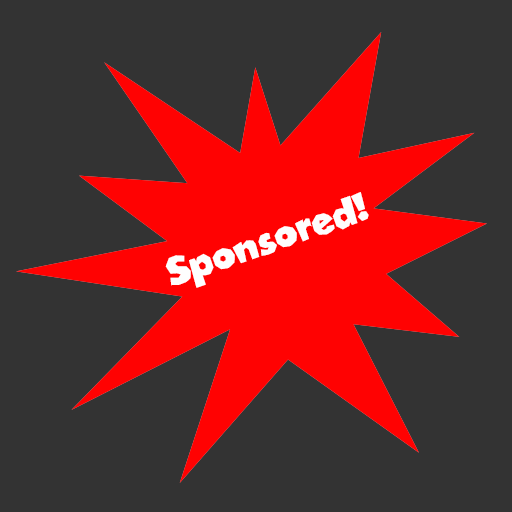
<style>
.page{position:relative;width:512px;height:512px;background:#333333}
.page>*{position:absolute;margin:0}
.t1{font:40px "CordelGroteska-Bold";color:#fefefe}
</style>
<div class="page">
<p class="t1" style="left:165px;top:192px;width:204px;height:96px;rotate:-19deg">Sponsored!</p>
</div>
